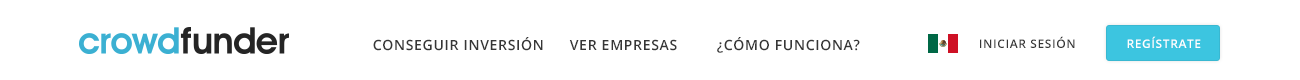
<style>
.page{position:relative;width:1300px;height:80px;background:#ffffff}
.page>*{position:absolute;margin:0}
.t1{font:14px "OpenSans-Semibold";letter-spacing:0.05em;color:#363636;text-transform:uppercase}
.t2{font:12px "OpenSans-Semibold";letter-spacing:0.05em;color:#363636;text-transform:uppercase}
.t3{font:12px "OpenSans-Semibold";letter-spacing:0.05em;color:#ffffff;text-transform:uppercase}
</style>
<div class="page">
<p class="t1" style="left:373px;top:37px;width:170px;height:14px">Conseguir inversión</p>
<p class="t1" style="left:569px;top:39px;width:108px;height:12px">Ver empresas</p>
<p class="t1" style="left:717px;top:37px;width:143px;height:16px">¿cómo funciona?</p>
<p class="t2" style="left:980px;top:36px;width:95px;height:12px">Iniciar sesión</p>
<p class="t3" style="left:1127px;top:36px;width:74px;height:12px">regístrate</p>
</div>
